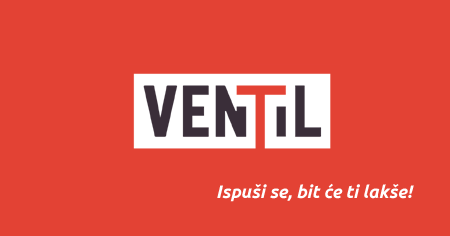
<style>
.page{position:relative;width:450px;height:236px;background:#e34234}
.page>*{position:absolute;margin:0}
.t1{font:18px "Ubuntu-BoldItalic";color:#ffffff}
</style>
<div class="page">
<p class="t1" style="left:217px;top:183px;width:197px;height:19px">Ispuši se, bit će ti lakše!</p>
</div>
